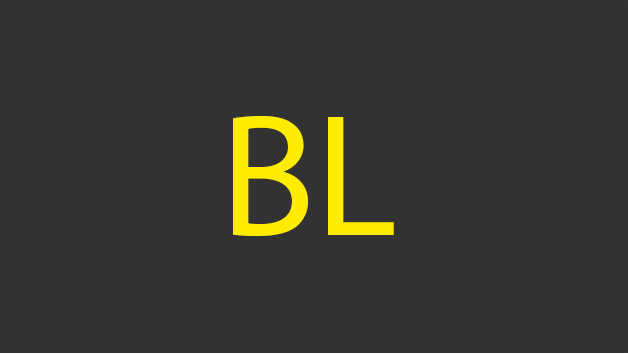
<style>
.page{position:relative;width:628px;height:354px;background:#323232}
.page>*{position:absolute;margin:0}
.t1{font:175px "MyriadPro-Regular";color:#ffec00}
</style>
<div class="page">
<p class="t1" style="left:233px;top:116px;width:161px;height:121px">BL</p>
</div>
